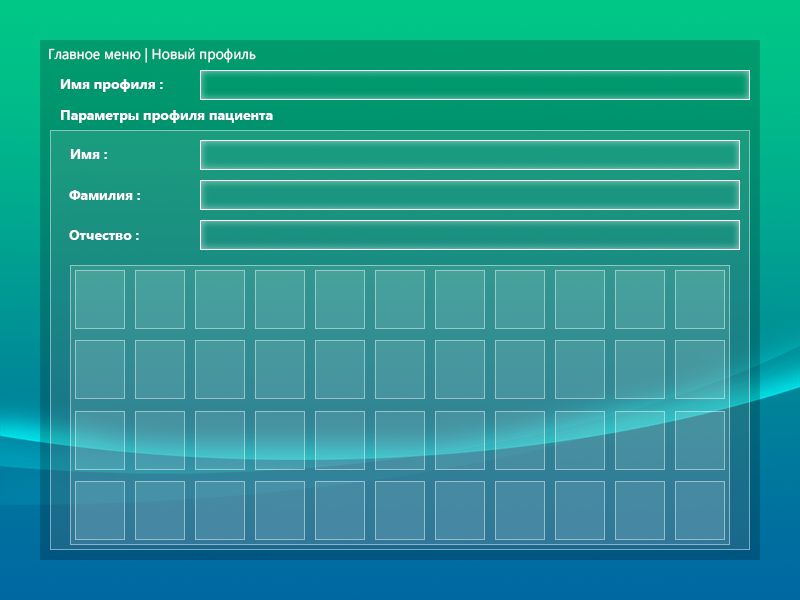
<style>
.page{position:relative;width:800px;height:600px}
.page>*{position:absolute;margin:0}
.t1{font:14.2px "SegoeUI";color:#ffffff}
.t2{font:14px "SegoeUI-Bold";color:#ffffff}
</style>
<div class="page">
<p class="t1" style="left:49px;top:47px;width:207px;height:16px">Главное меню | Новый профиль</p>
<p class="t2" style="left:60px;top:79px;width:103px;height:13px">Имя профиля :</p>
<p class="t2" style="left:61px;top:110px;width:212px;height:13px">Параметры профиля пациента</p>
<p class="t2" style="left:70px;top:149px;width:37px;height:10px">Имя :</p>
<p class="t2" style="left:69px;top:190px;width:71px;height:10px">Фамилия :</p>
<p class="t2" style="left:69px;top:230px;width:70px;height:10px">Отчество :</p>
</div>
